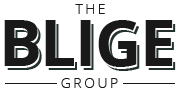
<style>
.page{position:relative;width:180px;height:91px;background:#ffffff}
.page>*{position:absolute;margin:0}
.t1{font:14px "OpenSans-Light";letter-spacing:0.18em;color:#191919}
.t2{font:64.1px "OpenSans-Bold";letter-spacing:-0.02em;color:#191919}
.t3{font:64.1px "OpenSans-Bold";letter-spacing:-0.02em}
</style>
<div class="page">
<p class="t1" style="left:75px;top:4px;width:30px;height:10px">THE</p>
<p class="t2" style="left:4px;top:20px;width:169px;height:47px">BLIGE</p>
<p class="t3" style="left:7px;top:24px;width:169px;height:47px">BLIGE</p>
<p class="t1" style="left:61px;top:78px;width:57px;height:10px">GROUP</p>
</div>
